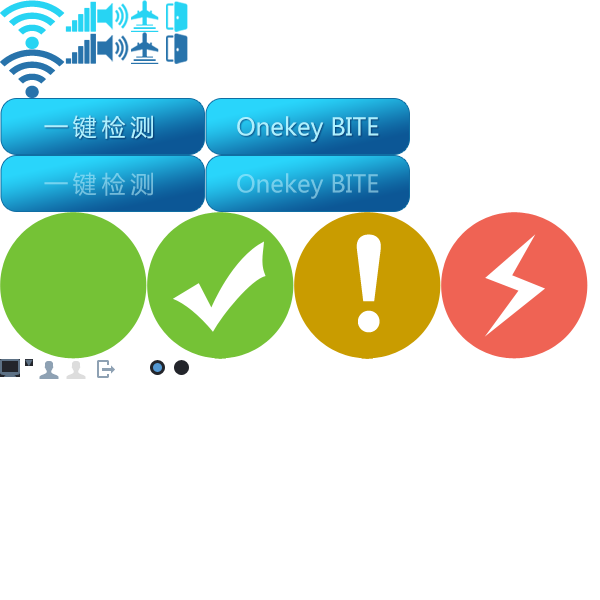
<style>
.page{position:relative;width:600px;height:600px;background:#ffffff}
.page>*{position:absolute;margin:0}
.t1{font:24px "MicrosoftYaHei";letter-spacing:0.2em;color:#adf1ff}
.t2{font:24px "MicrosoftYaHei";color:#adf1ff}
.t3{font:24px "MicrosoftYaHei";letter-spacing:0.2em;color:#73c6e4}
.t4{font:24px "MicrosoftYaHei";color:#73c6e4}
</style>
<div class="page">
<p class="t1" style="left:44px;top:115px;width:109px;height:24px">一键检测</p>
<p class="t2" style="left:237px;top:116px;width:142px;height:26px">Onekey BITE</p>
<p class="t3" style="left:44px;top:172px;width:109px;height:24px">一键检测</p>
<p class="t4" style="left:237px;top:173px;width:142px;height:26px">Onekey BITE</p>
</div>
